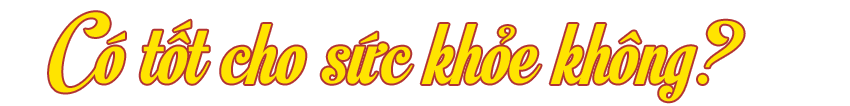
<style>
.page{position:relative;width:850px;height:106px;background:#ffffff}
.page>*{position:absolute;margin:0}
.t1{font:98.3px "SVN-MotionPicture";color:#ffe400}
</style>
<div class="page">
<p class="t1" style="left:49px;top:12px;width:695px;height:90px">Có tốt cho sức khỏe không?</p>
</div>
